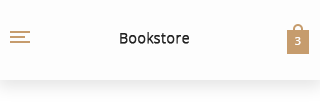
<style>
.page{position:relative;width:320px;height:107px;background:#fdfdfd}
.page>*{position:absolute;margin:0}
.t1{font:14px "OpenSans-Light";letter-spacing:0.05em;color:#212121;font-weight:bold}
.t2{font:11px "OpenSans-Semibold";letter-spacing:0.05em;color:#fefdfd}
</style>
<div class="page">
<p class="t1" style="left:120px;top:32px;width:69px;height:12px">Bookstore</p>
<p class="t2" style="left:295px;top:37px;width:6px;height:8px">3</p>
</div>
